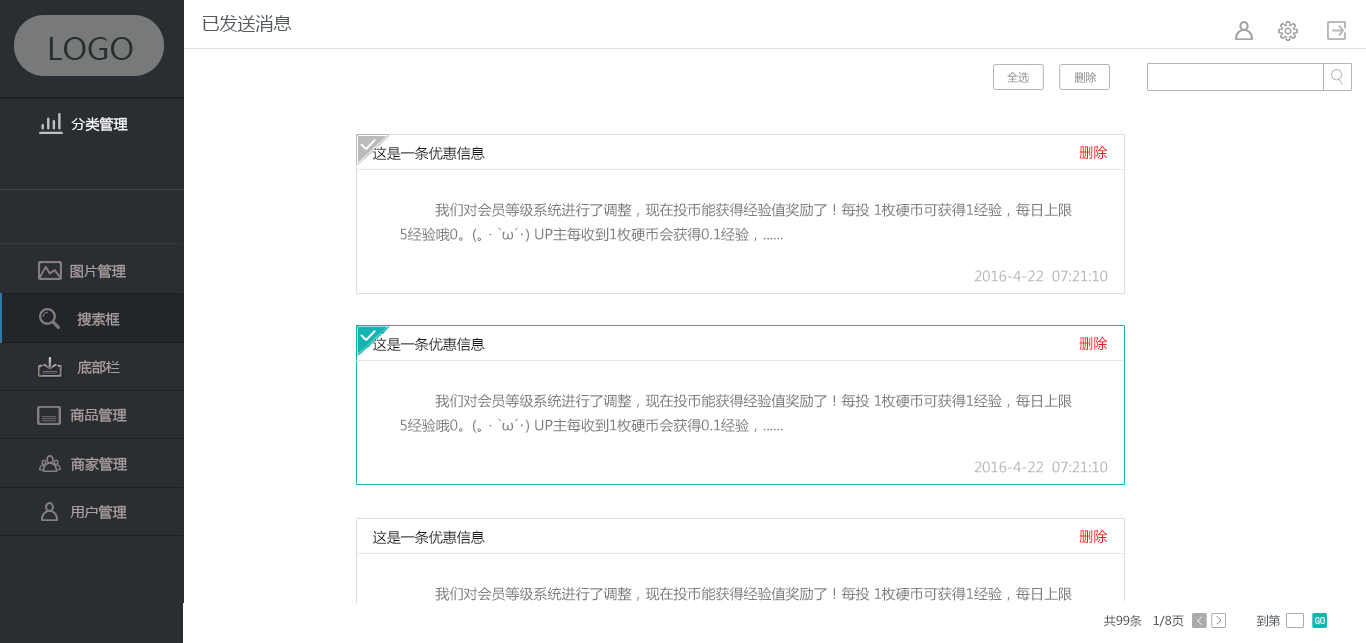
<style>
.page{position:relative;width:1366px;height:643px;background:#ffffff}
.page>*{position:absolute;margin:0}
.t1{font:18px "MicrosoftYaHei";color:#555a5f}
.t2{font:30px "MicrosoftYaHei";color:#2a2d32}
.t3{font:11.2px "MicrosoftYaHei"}
.t4{font:11.2px "MicrosoftYaHei";color:#808080}
.t5{font:14px "MicrosoftYaHei";color:#ffffff}
.t6{font:14px "MicrosoftYaHei";color:#181818}
.t7{font:14px "MicrosoftYaHei";color:#f91b1b}
.t8{font:14px "MicrosoftYaHei";color:#7e7c7c}
.t9{font:14px "MicrosoftYaHei";color:#ab9f9f}
.t10{font:14px "MicrosoftYaHei";color:#b5b5b5}
</style>
<div class="page">
<p class="t1" style="left:202px;top:15px;width:90px;height:17px">已发送消息</p>
<p class="t2" style="left:49px;top:37px;width:84px;height:23px">LOGO</p>
<p class="t3" style="left:1007px;top:71px;width:22px;height:12px">全选</p>
<p class="t4" style="left:1074px;top:72px;width:23px;height:11px">删除</p>
<p class="t5" style="left:71px;top:117px;width:57px;height:15px">分类管理</p>
<p class="t6" style="left:373px;top:146px;width:112px;height:15px">这是一条优惠信息</p>
<p class="t7" style="left:1079px;top:145px;width:29px;height:15px">删除</p>
<p class="t8" style="left:400px;top:203px;width:672px;height:39px">我们对会员等级系统进行了调整，现在投币能获得经验值奖励了！每投 1枚硬币可获得1经验，每日上限<br>5经验哦0。(｡・`ω´･) UP主每收到1枚硬币会获得0.1经验，......</p>
<p class="t9" style="left:70px;top:264px;width:56px;height:15px">图片管理</p>
<p class="t10" style="left:974px;top:270px;width:134px;height:12px">2016-4-22  07:21:10</p>
<p class="t9" style="left:77px;top:312px;width:43px;height:15px">搜索框</p>
<p class="t6" style="left:373px;top:337px;width:112px;height:15px">这是一条优惠信息</p>
<p class="t7" style="left:1079px;top:336px;width:29px;height:15px">删除</p>
<p class="t9" style="left:77px;top:360px;width:43px;height:14px">底部栏</p>
<p class="t8" style="left:400px;top:394px;width:672px;height:39px">我们对会员等级系统进行了调整，现在投币能获得经验值奖励了！每投 1枚硬币可获得1经验，每日上限<br>5经验哦0。(｡・`ω´･) UP主每收到1枚硬币会获得0.1经验，......</p>
<p class="t9" style="left:70px;top:408px;width:57px;height:15px">商品管理</p>
<p class="t9" style="left:71px;top:457px;width:57px;height:15px">商家管理</p>
<p class="t10" style="left:974px;top:461px;width:134px;height:12px">2016-4-22  07:21:10</p>
<p class="t9" style="left:70px;top:505px;width:57px;height:15px">用户管理</p>
<p class="t6" style="left:373px;top:530px;width:112px;height:15px">这是一条优惠信息</p>
<p class="t7" style="left:1079px;top:529px;width:29px;height:15px">删除</p>
<p class="t8" style="left:400px;top:587px;width:672px;height:39px">我们对会员等级系统进行了调整，现在投币能获得经验值奖励了！每投 1枚硬币可获得1经验，每日上限<br>5经验哦0。(｡・`ω´･) UP主每收到1枚硬币会获得0.1经验，......</p>
</div>
